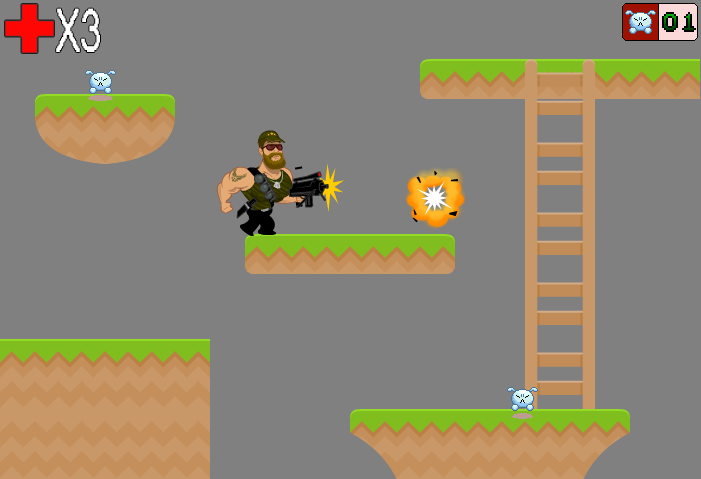
<style>
.page{position:relative;width:701px;height:479px;background:#808080}
.page>*{position:absolute;margin:0}
.t1{font:60px "MS Sans Serif";color:#ffffff;scale:0.63 1}
</style>
<div class="page">
<p class="t1" style="left:56px;top:8px;width:44px;height:44px">X3</p>
</div>
